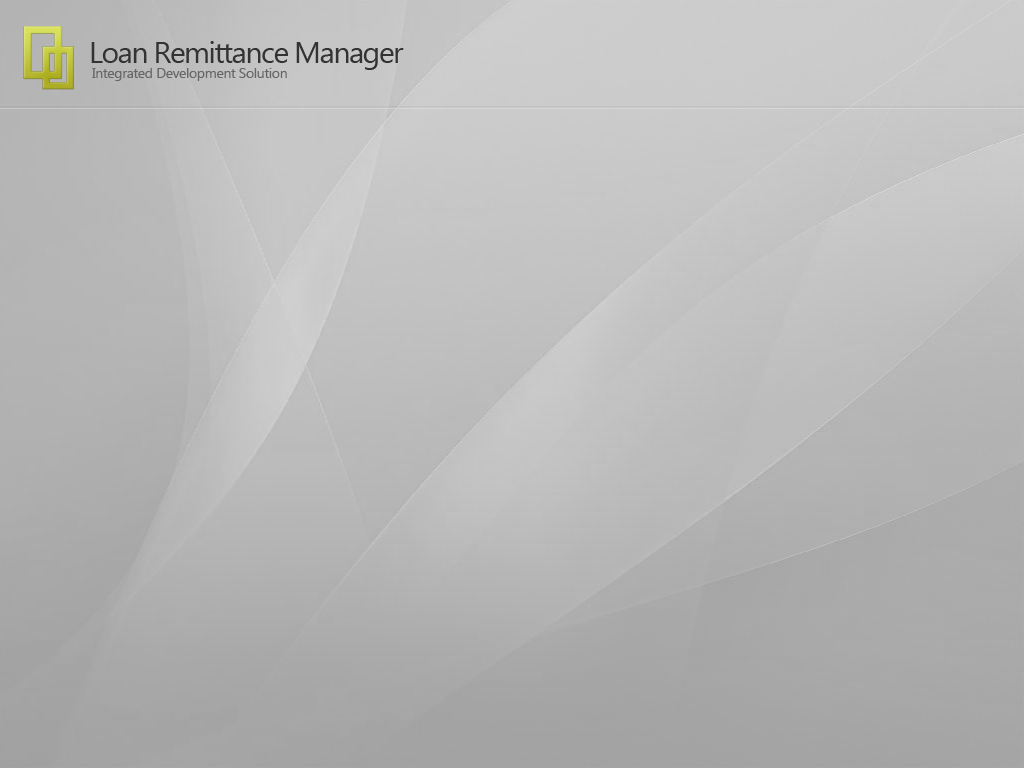
<style>
.page{position:relative;width:1024px;height:768px}
.page>*{position:absolute;margin:0}
.t1{font:30px "SegoeUI";letter-spacing:-0.05em;color:#333333}
.t2{font:14px "SegoeUI";letter-spacing:-0.025em;color:#666666}
</style>
<div class="page">
<p class="t1" style="left:91px;top:41px;width:313px;height:29px">Loan Remittance Manager</p>
<p class="t2" style="left:92px;top:68px;width:195px;height:13px">Integrated Development Solution</p>
</div>
